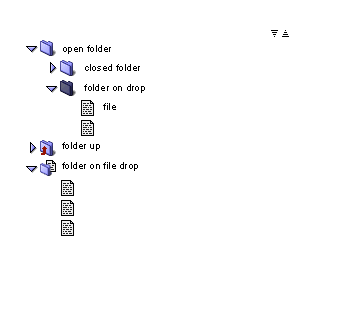
<style>
.page{position:relative;width:361px;height:309px;background:#ffffff}
.page>*{position:absolute;margin:0}
.t1{font:10px/19.5px "ArialMT";color:#000000}
</style>
<div class="page">
<p class="t1" style="left:62px;top:45px;width:83px;height:126px">open folder<br>        closed folder<br>        folder on drop<br>               file<br><br>folder up<br>folder on file drop</p>
</div>
